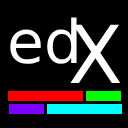
<style>
.page{position:relative;width:128px;height:128px;background:#000000}
.page>*{position:absolute;margin:0}
.t1{font:60px "DejaVuSans";color:#ffffff}
.t2{font:80px "DejaVuSans";color:#ffffff}
</style>
<div class="page">
<p class="t1" style="left:10px;top:17px;width:67px;height:47px">ed</p>
<p class="t2" style="left:70px;top:24px;width:51px;height:59px">X</p>
</div>
